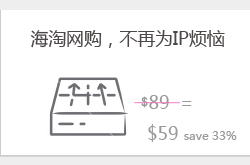
<style>
.page{position:relative;width:250px;height:165px;background:#ffffff}
.page>*{position:absolute;margin:0}
.t1{font:17.8px "MicrosoftYaHei";color:#4c4848}
.t2{font:17.8px "MicrosoftYaHei";color:#999999}
.t3{font:11.9px "MicrosoftYaHei";color:#999999}
</style>
<div class="page">
<p class="t1" style="left:30px;top:30px;width:195px;height:18px">海淘网购，不再为IP烦恼</p>
<p class="t2" style="left:148px;top:95px;width:89px;height:47px;text-align:center">89  =<br>              $59 <span class="t3">save 33%</span></p>
</div>
